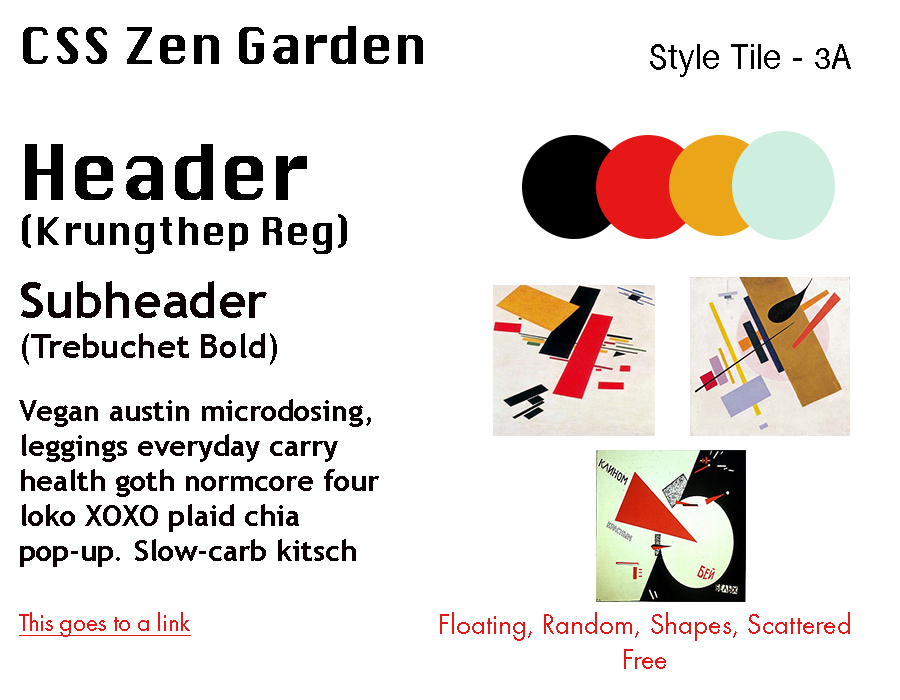
<style>
.page{position:relative;width:900px;height:700px;background:#ffffff}
.page>*{position:absolute;margin:0}
.t1{font:50px "Krungthep";color:#000000}
.t2{font:37.5px "InaiMathi";color:#000000}
.t3{font:37.5px "Krungthep";color:#000000}
.t4{font:75px "Krungthep";color:#000000}
.t5{font:33.3px "TrebuchetMS-Bold";color:#080000}
.t6{font:50px "TrebuchetMS-Bold";color:#080000}
.t7{font:29.2px "TrebuchetMS-Bold";color:#080000}
.t8{font:25px "FuturaPT-Book";color:#e51717;text-decoration:underline}
.t9{font:29.2px "FuturaPT-Book";color:#e51717}
</style>
<div class="page">
<p class="t1" style="left:23px;top:26px;width:400px;height:38px">CSS Zen Garden</p>
<p class="t2" style="left:650px;top:44px;width:201px;height:33px">Style Tile - 3A</p>
<p class="t3" style="left:22px;top:144px;width:325px;height:110px"><span class="t4">Header<br></span>(Krungthep Reg)</p>
<p class="t5" style="left:21px;top:281px;width:256px;height:84px"><span class="t6">Subheader<br></span>(Trebuchet Bold)</p>
<p class="t7" style="left:19px;top:399px;width:360px;height:168px">Vegan austin microdosing, leggings everyday carry health goth normcore four loko XOXO plaid chia pop-up. Slow-carb kitsch sriracha, paleo VHS vinyl everyday carry umami squid pour-over.</p>
<p class="t8" style="left:19px;top:612px;width:172px;height:25px">This goes to a link</p>
<p class="t9" style="left:440px;top:612px;width:410px;height:57px;text-align:center">Floating, Random, Shapes, Scattered<br>Free</p>
</div>
